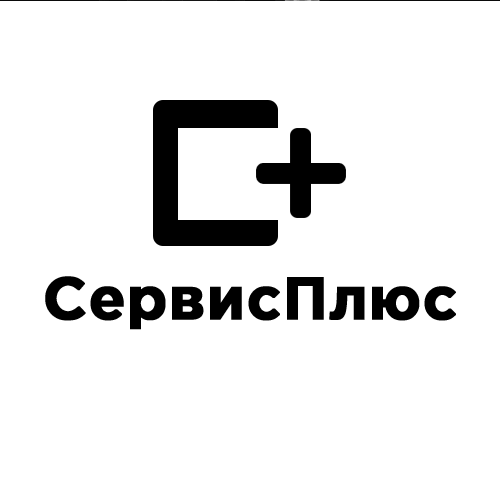
<style>
.page{position:relative;width:500px;height:500px;background:#ffffff}
.page>*{position:absolute;margin:0}
.t1{font:60px "GothamPro-Bold";color:#000000;font-weight:bold}
</style>
<div class="page">
<p class="t1" style="left:45px;top:275px;width:411px;height:54px">СервисПлюс</p>
</div>
